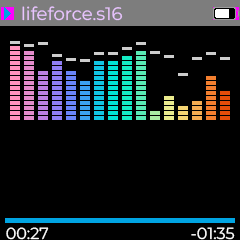
<style>
.page{position:relative;width:240px;height:240px;background:#000000}
.page>*{position:absolute;margin:0}
.t1{font:18px "Montserrat-Regular";color:#e9c5ff}
.t2{font:16px "Montserrat-Regular";color:#ffffff}
</style>
<div class="page">
<p class="t1" style="left:22px;top:6px;width:101px;height:15px">lifeforce.s16</p>
<p class="t2" style="left:6px;top:227px;width:43px;height:13px">00:27</p>
<p class="t2" style="left:191px;top:227px;width:44px;height:13px">-01:35</p>
</div>
